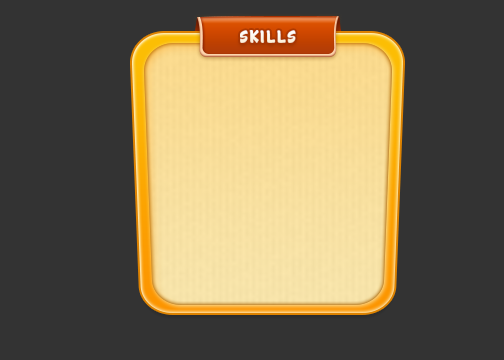
<style>
.page{position:relative;width:504px;height:360px;background:#333333}
.page>*{position:absolute;margin:0}
.t1{font:17.7px "Cartwheel";color:#fdf7ea;scale:1.04 1}
</style>
<div class="page">
<p class="t1" style="left:240px;top:30px;width:56px;height:13px">skills</p>
</div>
